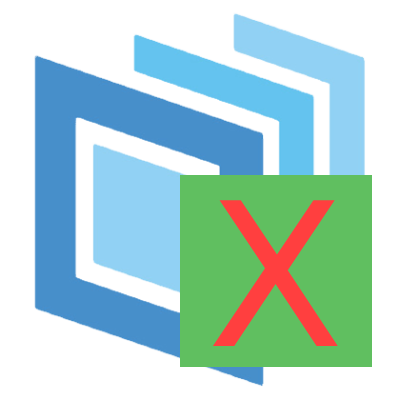
<style>
.page{position:relative;width:400px;height:400px;background:#ffffff}
.page>*{position:absolute;margin:0}
.t1{font:200px "DejaVuSans";color:#ff3f3f}
</style>
<div class="page">
<p class="t1" style="left:212px;top:200px;width:126px;height:146px">X</p>
</div>
